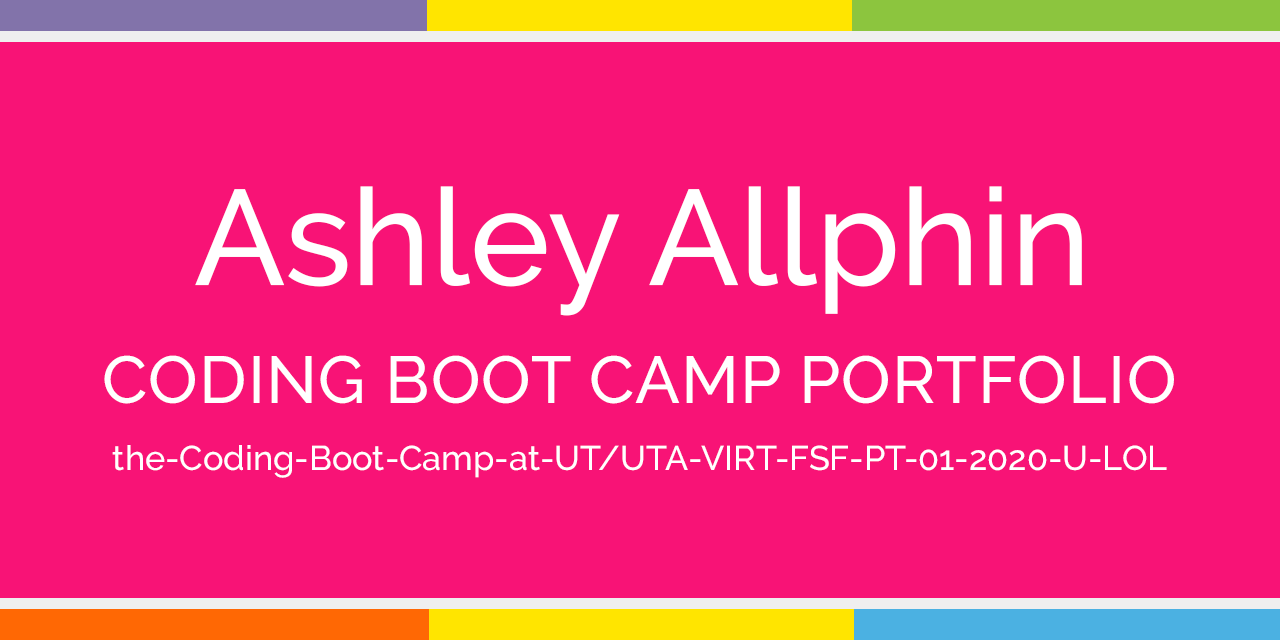
<style>
.page{position:relative;width:1280px;height:640px;background:#f81376}
.page>*{position:absolute;margin:0}
.t1{font:135.1px "Raleway-Medium";color:#ffffff}
.t2{font:66.2px "Raleway-Medium";letter-spacing:0.02em;color:#ffffff}
.t3{font:34.2px "Raleway-Medium";color:#ffffff}
</style>
<div class="page">
<p class="t1" style="left:195px;top:186px;width:887px;height:130px">Ashley Allphin</p>
<p class="t2" style="left:104px;top:355px;width:1070px;height:49px">CODING BOOT CAMP PORTFOLIO</p>
<p class="t3" style="left:112px;top:445px;width:1055px;height:33px">the-Coding-Boot-Camp-at-UT/UTA-VIRT-FSF-PT-01-2020-U-LOL</p>
</div>
